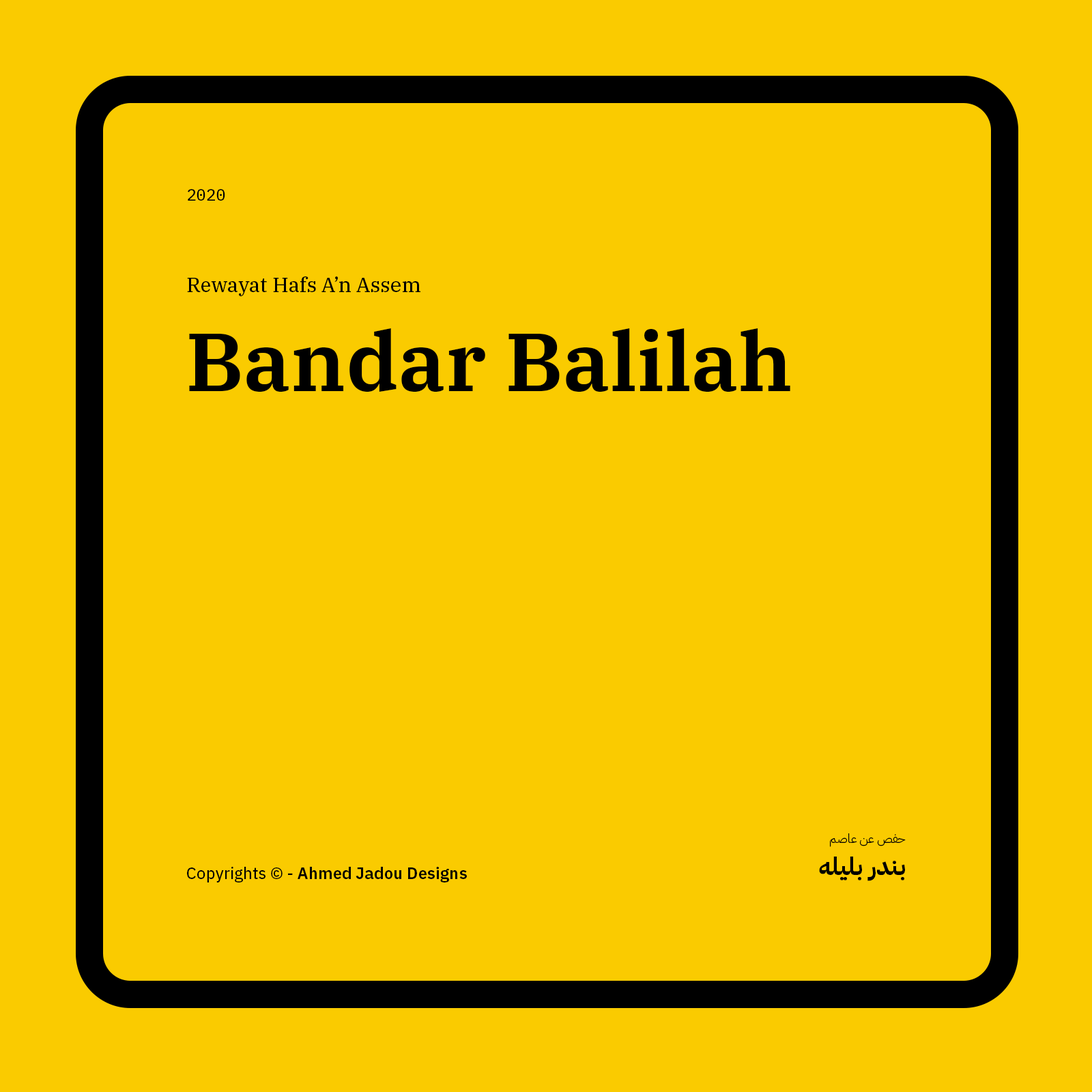
<style>
.page{position:relative;width:1092px;height:1092px;background:#facb00}
.page>*{position:absolute;margin:0}
.t1{font:16.4px "IBMPlexMono-Text";color:#000000}
.t2{font:20.5px "IBMPlexSerif-Text";color:#000000}
.t3{font:81.9px "IBMPlexSerif-SemiBold";color:#000000}
.t4{font:12.3px "IBMPlexArabic-Light";color:#000000}
.t5{font:24.6px "IBMPlexArabic-Bold";color:#000000}
.t6{font:16.4px "IBMPlexSans-SemiBold";color:#000000}
.t7{font:16.4px "IBMPlexSans-Text";color:#000000}
</style>
<div class="page">
<p class="t1" style="left:188px;top:189px;width:37px;height:12px">2020</p>
<p class="t2" style="left:187px;top:276px;width:233px;height:20px">Rewayat Hafs A’n Assem</p>
<p class="t3" style="left:189px;top:328px;width:601px;height:64px">Bandar Balilah</p>
<p class="t4" style="left:830px;top:833px;width:76px;height:14px">حفص عن عاصم</p>
<p class="t5" style="left:819px;top:857px;width:86px;height:24px">بندر بليله</p>
<p class="t6" style="left:187px;top:867px;width:280px;height:15px"><span class="t7">Copyrights © - </span>Ahmed Jadou Designs</p>
</div>
